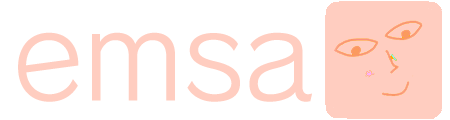
<style>
.page{position:relative;width:450px;height:120px;background:#ffffff}
.page>*{position:absolute;margin:0}
.t1{font:120px "RodinBokutohPro-M";color:#ffcdc0}
</style>
<div class="page">
<p class="t1" style="left:18px;top:32px;width:294px;height:70px">emsa</p>
</div>
